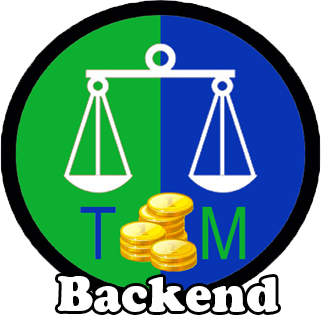
<style>
.page{position:relative;width:321px;height:315px;background:#ffffff}
.page>*{position:absolute;margin:0}
.t1{font:48px "CooperBlackStd";color:#ffffff}
</style>
<div class="page">
<p class="t1" style="left:57px;top:276px;width:221px;height:36px">Backend</p>
</div>
